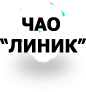
<style>
.page{position:relative;width:86px;height:92px;background:#ffffff}
.page>*{position:absolute;margin:0}
.t1{font:18px "Tahoma-Bold";color:#000000}
.t2{font:18px "Tahoma";color:#000000}
</style>
<div class="page">
<p class="t1" style="left:0px;top:17px;width:87px;height:36px;text-align:right"><span class="t2"> </span>   ЧАО “ЛИНИК”</p>
</div>
